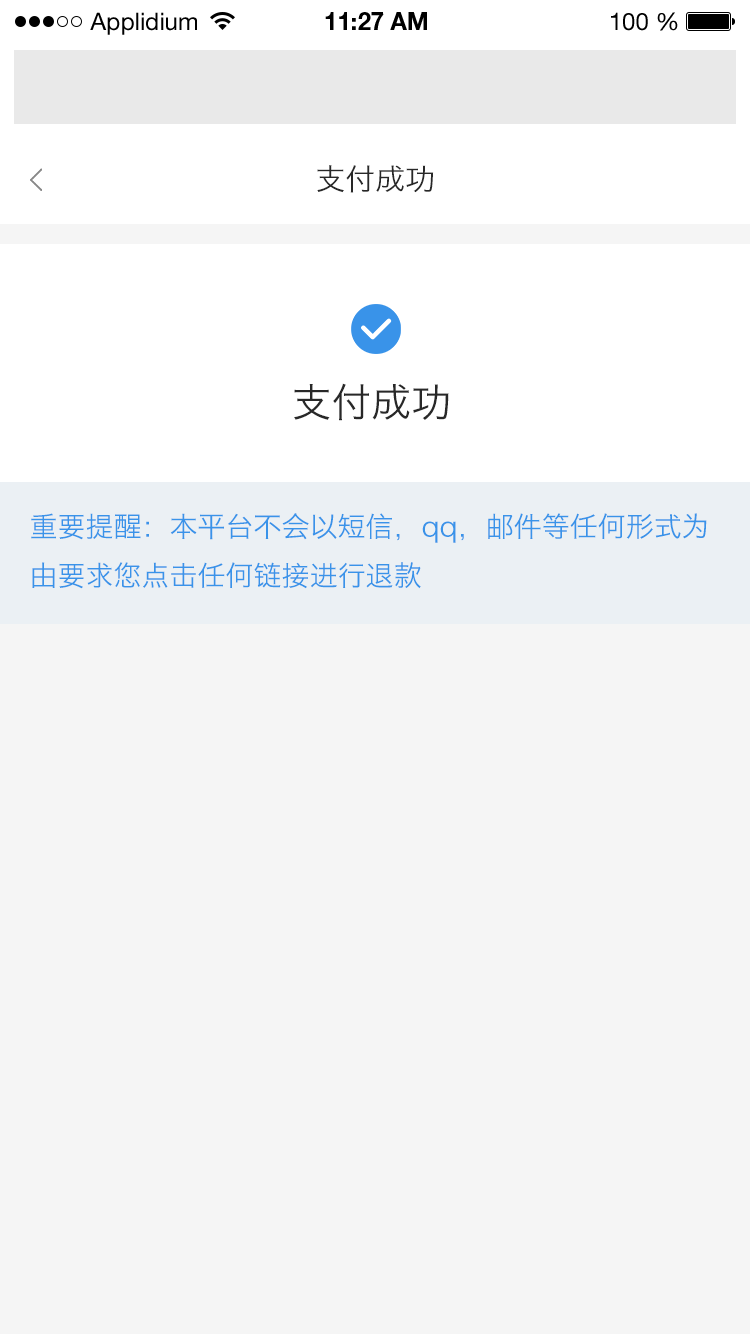
<style>
.page{position:relative;width:750px;height:1334px;background:#f5f5f5}
.page>*{position:absolute;margin:0}
.t1{font:24px "HelveticaNeueLTStd-Roman";color:#000000}
.t2{font:24px "HelveticaNeueLTStd-Bd";color:#000000}
.t3{font:30px "HiraginoSansGB-W3";color:#282828}
.t4{font:40px "HiraginoSansGB-W3";color:#282828}
.t5{font:28px "HiraginoSansGB-W3";color:#3993e9}
</style>
<div class="page">
<p class="t1" style="left:90px;top:12px;width:107px;height:23px">Applidium</p>
<p class="t2" style="left:325px;top:12px;width:102px;height:18px">11:27 AM</p>
<p class="t1" style="left:611px;top:12px;width:67px;height:19px">100 %</p>
<p class="t3" style="left:317px;top:165px;width:117px;height:28px">支付成功</p>
<p class="t4" style="left:294px;top:383px;width:155px;height:38px">支付成功</p>
<p class="t5" style="left:31px;top:513px;width:676px;height:76px">重要提醒：本平台不会以短信，qq，邮件等任何形式为由要求您点击任何链接进行退款</p>
</div>
